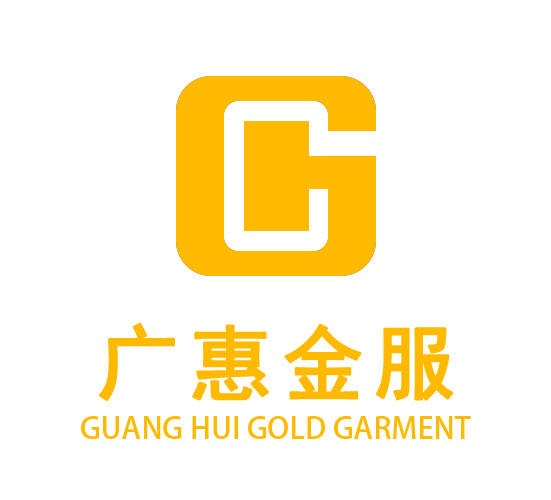
<style>
.page{position:relative;width:551px;height:500px;background:#ffffff}
.page>*{position:absolute;margin:0}
.t1{font:82px "SimHei";letter-spacing:0.1em;color:#ffba00;font-weight:bold}
.t2{font:30px "AdobeHeitiStd-Regular";color:#ffba00}
</style>
<div class="page">
<p class="t1" style="left:99px;top:322px;width:355px;height:79px">广惠金服</p>
<p class="t2" style="left:81px;top:416px;width:390px;height:23px">GUANG HUI GOLD GARMENT</p>
</div>
